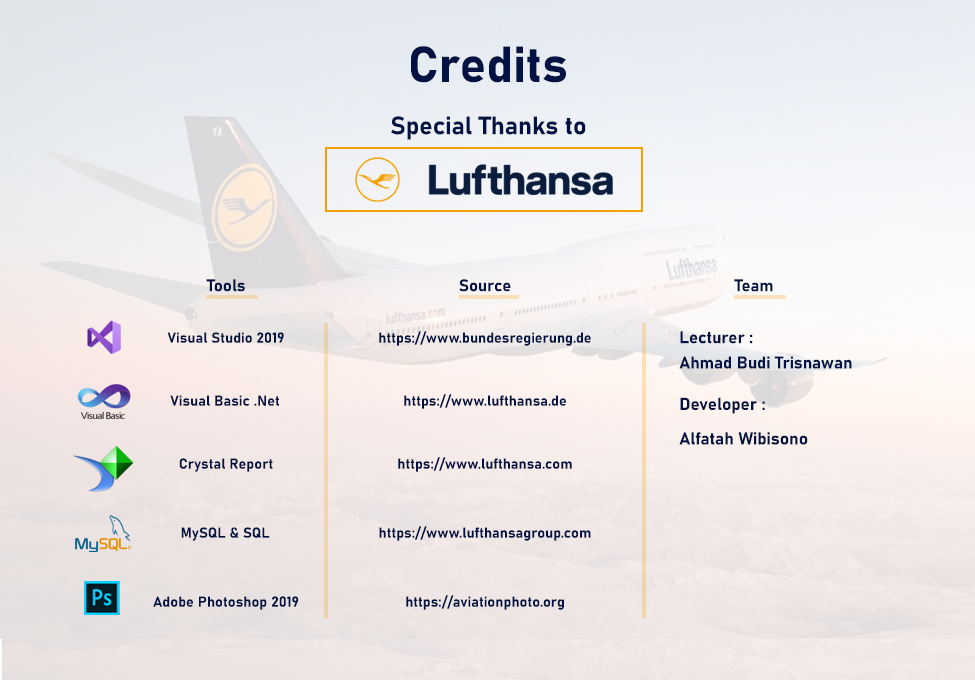
<style>
.page{position:relative;width:975px;height:680px}
.page>*{position:absolute;margin:0}
.t1{font:50px "Bahnschrift-Bold";color:#021242}
.t2{font:25px "Bahnschrift-Bold";color:#021242}
.t3{font:16.7px "Bahnschrift-Bold";color:#021242}
.t4{font:14.6px "Bahnschrift-Bold";color:#021242}
.t5{font:16.9px/25.4px "Bahnschrift-Bold";color:#021242}
.t6{font:17.1px/34.3px "Bahnschrift-Bold";color:#021242}
.t7{font:17.1px/25.7px "Bahnschrift-Bold";color:#021242}
</style>
<div class="page">
<p class="t1" style="left:411px;top:46px;width:155px;height:37px">Credits</p>
<p class="t2" style="left:391px;top:116px;width:195px;height:24px">Special Thanks to</p>
<p class="t3" style="left:206px;top:279px;width:39px;height:13px">Tools</p>
<p class="t3" style="left:459px;top:279px;width:52px;height:13px">Source</p>
<p class="t3" style="left:734px;top:279px;width:39px;height:13px">Team</p>
<p class="t4" style="left:167px;top:332px;width:117px;height:11px">Visual Studio 2019</p>
<p class="t4" style="left:379px;top:331px;width:212px;height:15px">https://www.bundesregierung.de</p>
<p class="t5" style="left:679px;top:331px;width:173px;height:38px">Lecturer :<br>Ahmad Budi Trisnawan</p>
<p class="t4" style="left:170px;top:395px;width:109px;height:11px">Visual Basic .Net</p>
<p class="t4" style="left:404px;top:394px;width:162px;height:15px">https://www.lufthansa.de</p>
<p class="t6" style="left:679px;top:397px;width:129px;height:48px"><span class="t7">Developer :<br></span>Alfatah Wibisono</p>
<p class="t4" style="left:179px;top:458px;width:94px;height:14px">Crystal Report</p>
<p class="t4" style="left:398px;top:457px;width:174px;height:15px">https://www.lufthansa.com</p>
<p class="t4" style="left:181px;top:527px;width:89px;height:14px">MySQL &amp; SQL</p>
<p class="t4" style="left:379px;top:526px;width:212px;height:15px">https://www.lufthansagroup.com</p>
<p class="t4" style="left:153px;top:596px;width:146px;height:14px">Adobe Photoshop 2019</p>
<p class="t4" style="left:406px;top:595px;width:158px;height:15px">https://aviationphoto.org</p>
</div>
